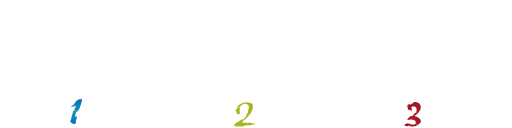
<style>
.page{position:relative;width:512px;height:128px;background:#ffffff}
.page>*{position:absolute;margin:0}
.t1{font:36px "RuachLetPlain";letter-spacing:0.01em;color:#0f7fbc}
.t2{font:36px "RuachLetPlain";letter-spacing:0.01em;color:#abb420}
.t3{font:36px "RuachLetPlain";letter-spacing:0.01em;color:#a41826}
</style>
<div class="page">
<p class="t1" style="left:70px;top:98px;width:13px;height:27px">1</p>
<p class="t2" style="left:234px;top:102px;width:21px;height:25px">2</p>
<p class="t3" style="left:404px;top:102px;width:17px;height:25px">3</p>
</div>
